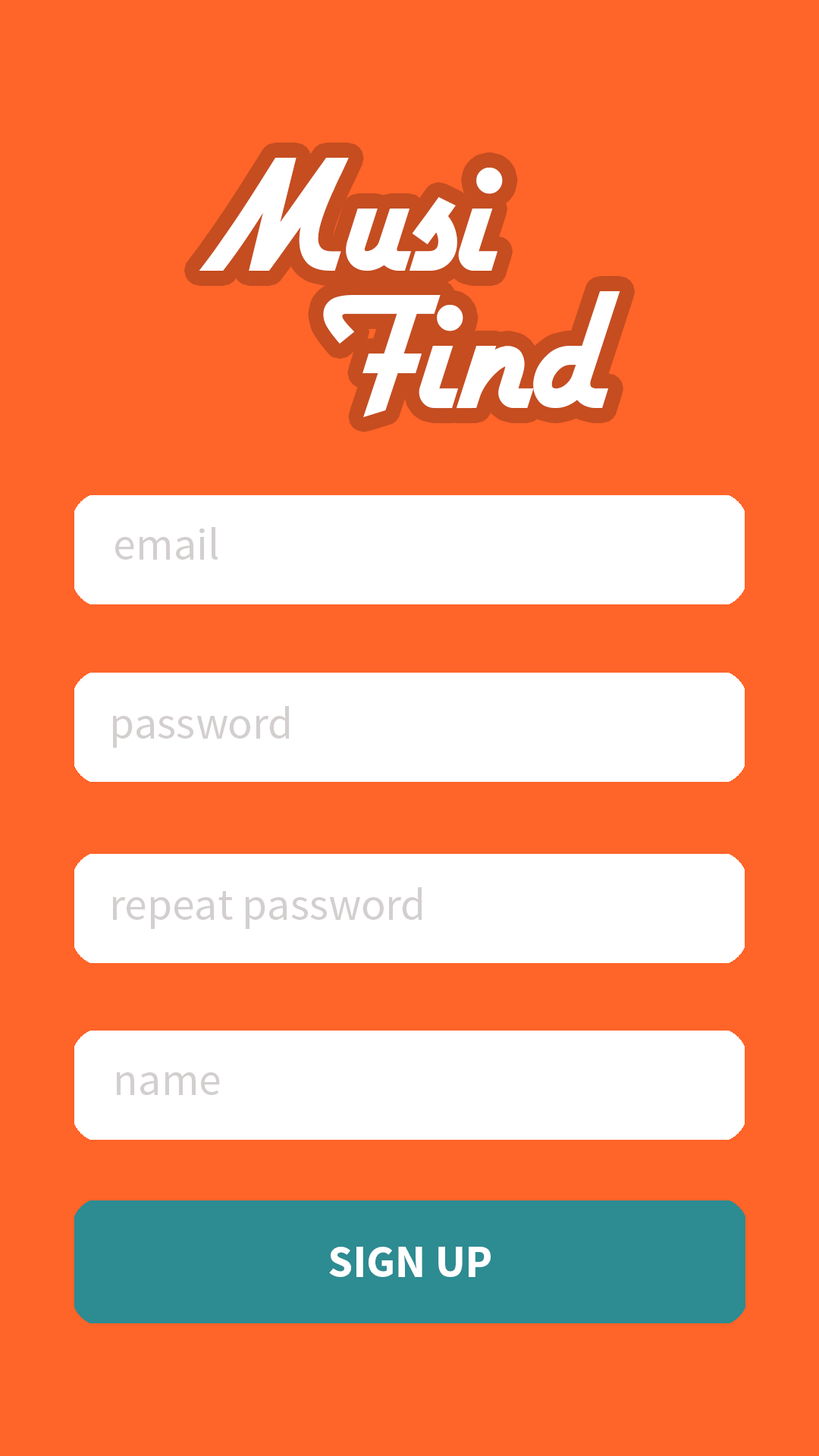
<style>
.page{position:relative;width:819px;height:1456px;background:#ff6429}
.page>*{position:absolute;margin:0}
.t1{font:189.6px "Airstream";color:#ffffff}
.t2{font:45.5px "SourceSansPro-Regular";color:#d3cfcf}
.t3{font:45.5px "SourceSansPro-Bold";color:#ffffff}
</style>
<div class="page">
<p class="t1" style="left:199px;top:158px;width:304px;height:113px">Musi</p>
<p class="t1" style="left:323px;top:291px;width:297px;height:126px">Find</p>
<p class="t2" style="left:115px;top:527px;width:103px;height:33px">email</p>
<p class="t2" style="left:113px;top:706px;width:176px;height:42px">password</p>
<p class="t2" style="left:113px;top:887px;width:309px;height:42px">repeat password</p>
<p class="t2" style="left:117px;top:1072px;width:103px;height:23px">name</p>
<p class="t3" style="left:329px;top:1247px;width:162px;height:30px">SIGN UP</p>
</div>
